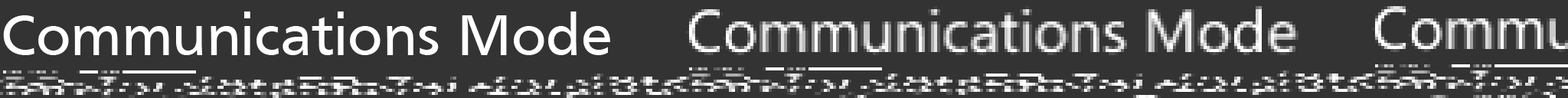
<style>
.page{position:relative;width:1568px;height:98px;background:#333333}
.page>*{position:absolute;margin:0}
.t1{font:60.2px "Frutiger";color:#ffffff}
</style>
<div class="page">
<p class="t1" style="left:3px;top:11px;width:607px;height:44px">Communications Mode</p>
</div>
